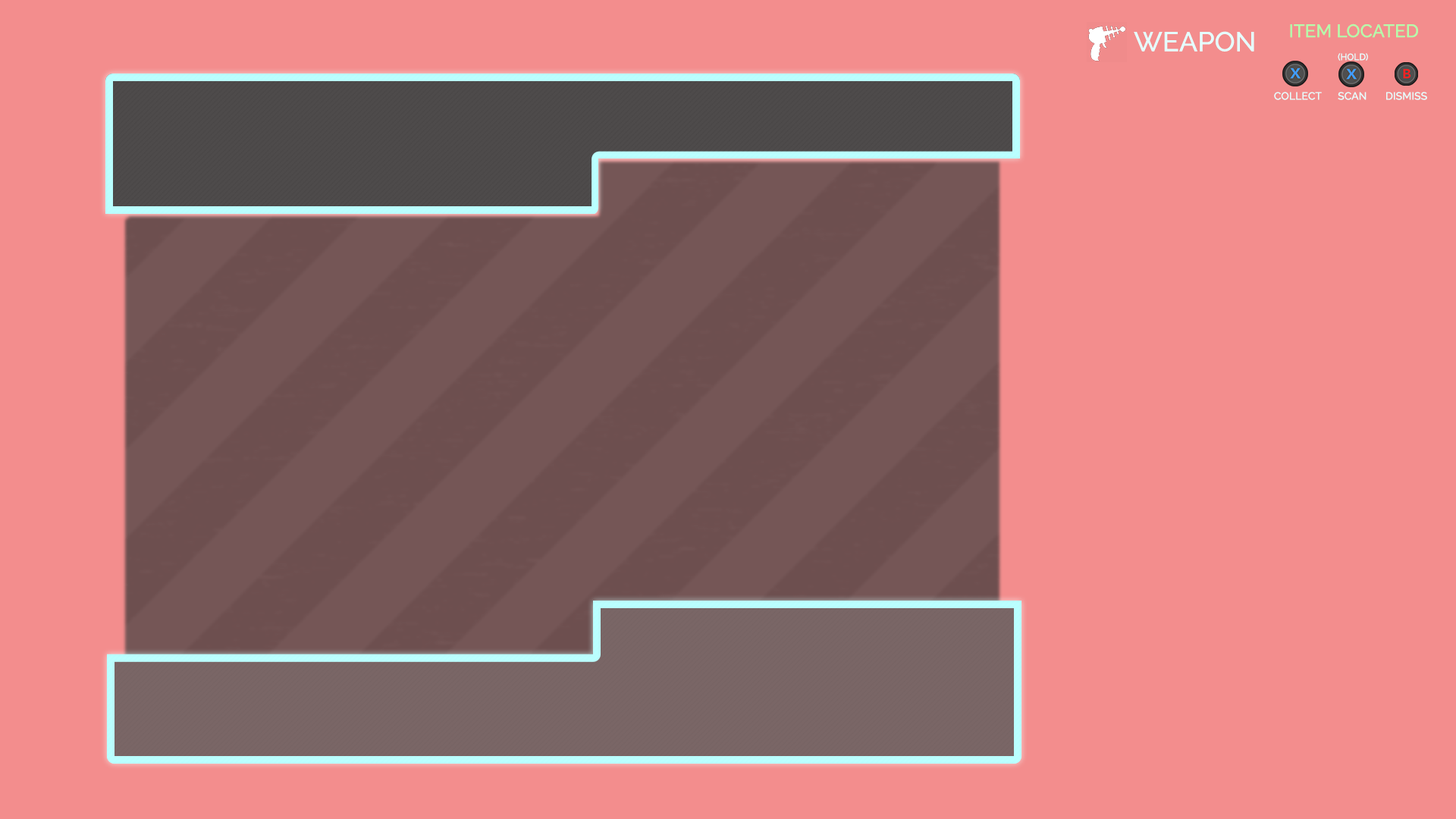
<style>
.page{position:relative;width:1456px;height:819px;background:#f38d8d}
.page>*{position:absolute;margin:0}
.t1{font:18.2px "Raleway-Medium";color:#b5fcab}
.t2{font:27.3px "Raleway-Medium";color:#e5ffff}
.t3{font:9.1px "Raleway-Medium";color:#e5ffff}
.t4{font:10.6px "Raleway-Medium";color:#e5ffff}
</style>
<div class="page">
<p class="t1" style="left:1290px;top:24px;width:128px;height:14px">ITEM LOCATED</p>
<p class="t2" style="left:1134px;top:31px;width:120px;height:21px">WEAPON</p>
<p class="t3" style="left:1338px;top:53px;width:30px;height:8px">(HOLD)</p>
<p class="t4" style="left:1274px;top:92px;width:48px;height:8px">COLLECT</p>
<p class="t4" style="left:1338px;top:92px;width:28px;height:8px">SCAN</p>
<p class="t4" style="left:1386px;top:92px;width:41px;height:8px">DISMISS</p>
</div>
